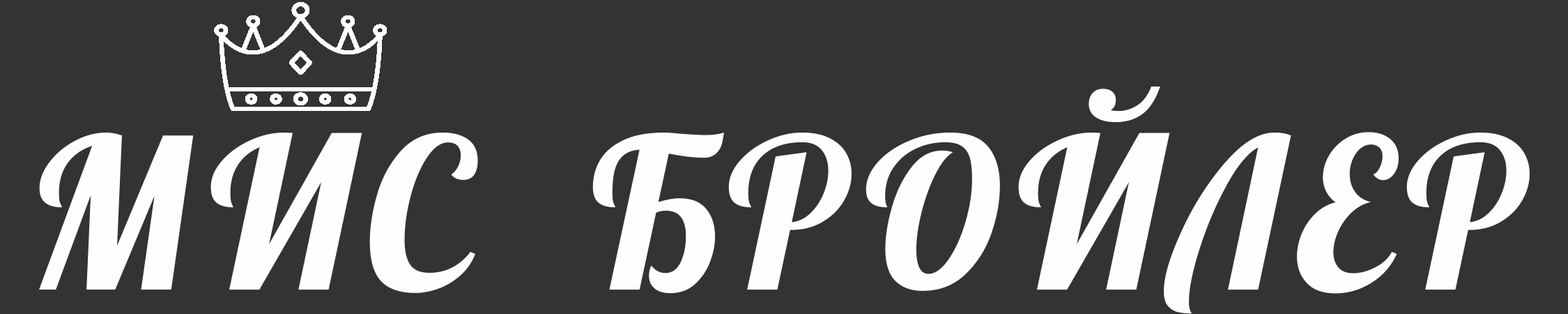
<style>
.page{position:relative;width:1568px;height:314px;background:#333333}
.page>*{position:absolute;margin:0}
.t1{font:209.1px "Lobster-Regular";letter-spacing:0.05em;color:#fefefe;text-transform:uppercase}
</style>
<div class="page">
<p class="t1" style="left:39px;top:86px;width:1491px;height:228px">МИС  БРОЙЛЕР</p>
</div>
